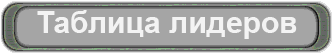
<style>
.page{position:relative;width:333px;height:54px;background:#a5a5a5}
.page>*{position:absolute;margin:0}
.t1{font:30px "Arial-BoldMT";color:#f3f3f3}
</style>
<div class="page">
<p class="t1" style="left:37px;top:10px;width:260px;height:29px">Таблица лидеров</p>
</div>
